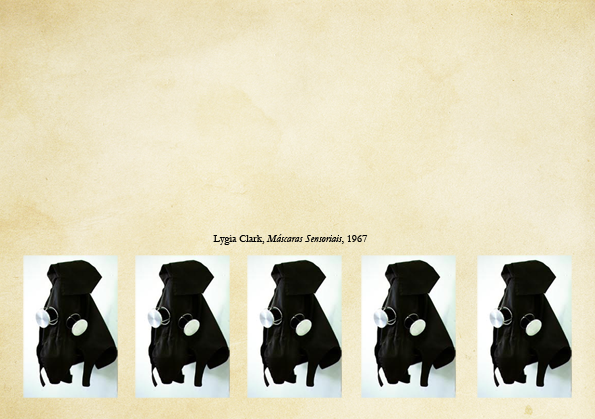
<style>
.page{position:relative;width:595px;height:419px}
.page>*{position:absolute;margin:0}
.t1{font:11px "Garamond-Italic";color:#000000}
.t2{font:11px "Garamond";color:#000000}
</style>
<div class="page">
<p class="t1" style="left:213px;top:234px;width:155px;height:11px"><span class="t2">Lygia Clark, </span>Máscaras Sensoriais<span class="t2">, 1967</span></p>
</div>
